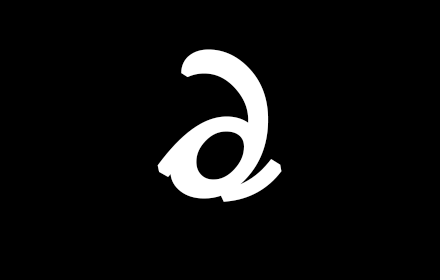
<style>
.page{position:relative;width:440px;height:280px;background:#000000}
.page>*{position:absolute;margin:0}
.t1{font:300px "FrenchScriptMT";color:#ffffff;font-weight:bold;scale:1.2 1}
</style>
<div class="page">
<p class="t1" style="left:157px;top:49px;width:125px;height:153px">d</p>
</div>
